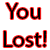
<style>
.page{position:relative;width:50px;height:50px;background:#ffffff}
.page>*{position:absolute;margin:0}
.t1{font:23px "MyriadPro-Regular";color:#000000}
</style>
<div class="page">
<p class="t1" style="left:3px;top:3px;width:44px;height:44px">You Lost!</p>
</div>
